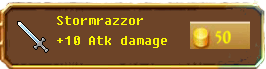
<style>
.page{position:relative;width:266px;height:69px;background:#6d4428}
.page>*{position:absolute;margin:0}
.t1{font:14px "Fixedsys";color:#f8f602}
</style>
<div class="page">
<p class="t1" style="left:57px;top:16px;width:86px;height:9px">Stormrazzor</p>
<p class="t1" style="left:57px;top:36px;width:110px;height:12px">+10 Atk damage</p>
</div>
